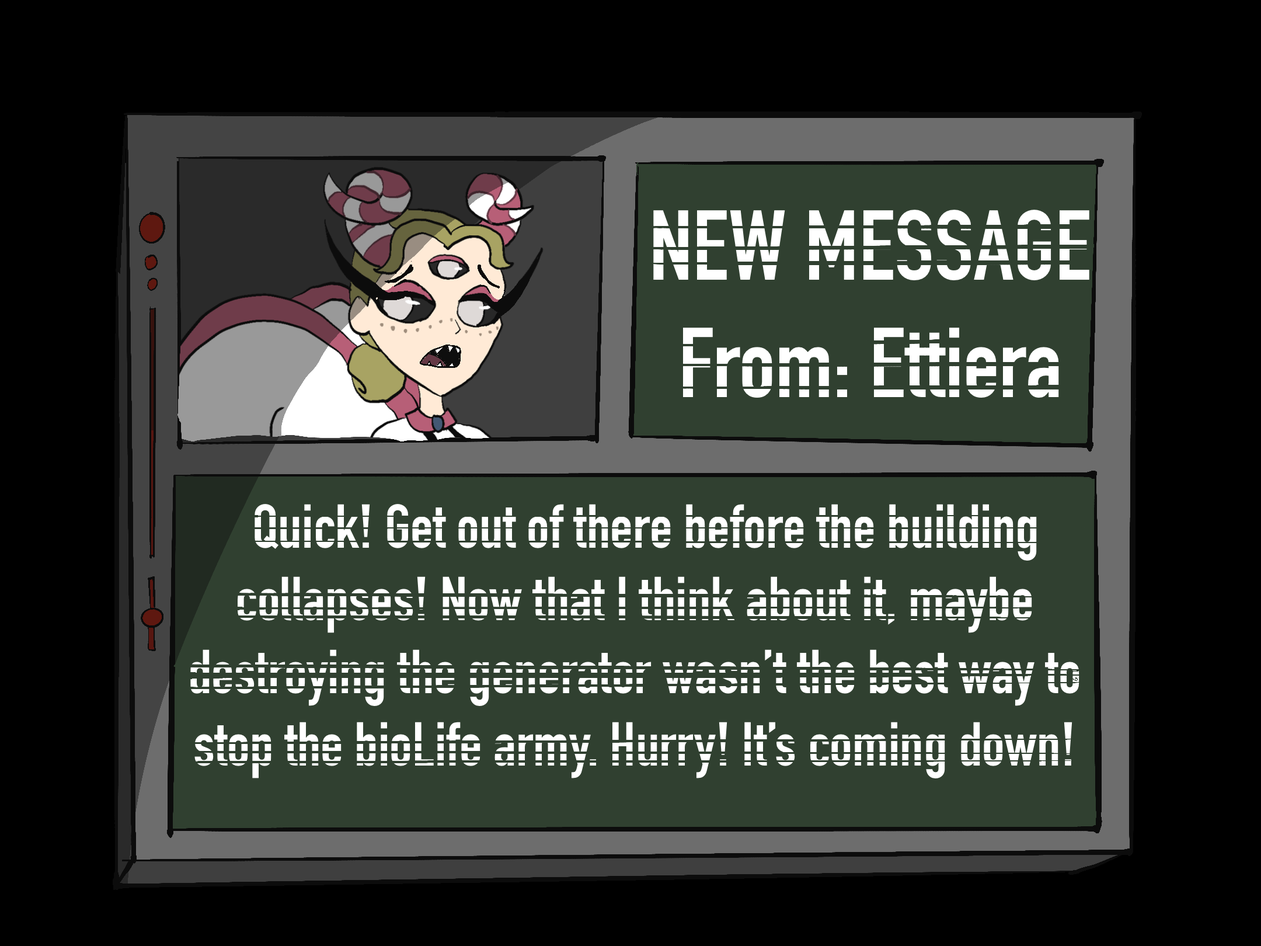
<style>
.page{position:relative;width:1261px;height:946px;background:#000000}
.page>*{position:absolute;margin:0}
.t1{font:97.4px "DINCondensed-Bold";color:#ffffff}
.t2{font:60.9px "DINCondensed-Bold";color:#ffffff}
</style>
<div class="page">
<p class="t1" style="left:0px;top:0px;width:1261px;height:946px;text-align:center">NEW MESSAGE<br>From: Ettiera</p>
<p class="t2" style="left:0px;top:0px;width:1261px;height:946px;text-align:center">Quick! Get out of there before the building collapses! Now that I think about it, maybe destroying the generator wasn’t the best way to stop the bioLife army. Hurry! It’s coming down!</p>
</div>
